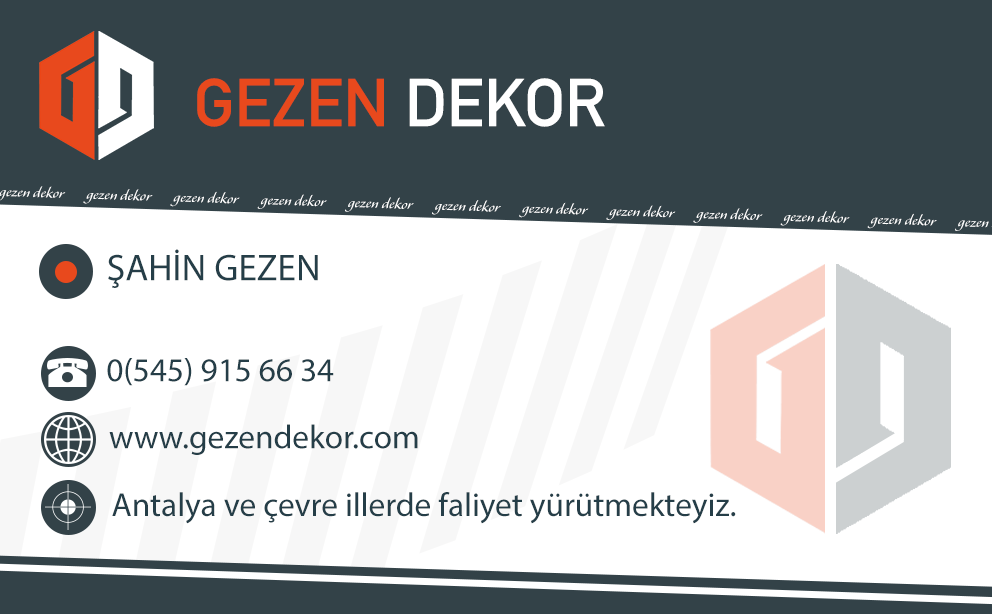
<style>
.page{position:relative;width:992px;height:614px;background:#334248}
.page>*{position:absolute;margin:0}
.t1{font:66.7px "DINAlternate-Bold";color:#e8491d}
.t2{font:66.7px "DINAlternate-Bold";color:#ffffff}
.t3{font:37.5px "MyriadPro-Regular";color:#253e48}
.t4{font:33.3px "MyriadPro-Regular";color:#253e48}
</style>
<div class="page">
<p class="t1" style="left:197px;top:78px;width:408px;height:49px">GEZEN <span class="t2">DEKOR</span></p>
<p class="t3" style="left:108px;top:249px;width:210px;height:39px">ŞAHİN GEZEN</p>
<p class="t4" style="left:107px;top:358px;width:227px;height:28px">0(545) 915 66 34</p>
<p class="t4" style="left:109px;top:424px;width:309px;height:31px">www.gezendekor.com</p>
<p class="t4" style="left:112px;top:492px;width:624px;height:32px">Antalya ve çevre illerde faliyet yürütmekteyiz.</p>
</div>
